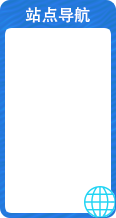
<style>
.page{position:relative;width:116px;height:218px;background:#ffffff}
.page>*{position:absolute;margin:0}
.t1{font:16.3px "AdobeHeitiStd-Regular";color:#ffffff}
</style>
<div class="page">
<p class="t1" style="left:25px;top:7px;width:65px;height:16px">站点导航</p>
</div>
